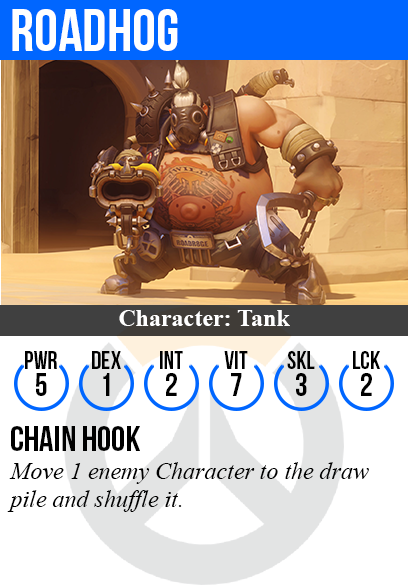
<style>
.page{position:relative;width:408px;height:585px;background:#ffffff}
.page>*{position:absolute;margin:0}
.t1{font:60px "BebasNeue";color:#ffffff}
.t2{font:24px "TimesNewRomanPS-BoldMT";color:#ffffff}
.t3{font:25px "BebasNeue";color:#000000}
.t4{font:32px "BebasNeue";color:#000000}
.t5{font:36px "BebasNeue";color:#000000}
.t6{font:24px "TimesNewRomanPS-ItalicMT";color:#000000}
</style>
<div class="page">
<p class="t1" style="left:12px;top:9px;width:166px;height:42px">roadhog</p>
<p class="t2" style="left:119px;top:310px;width:171px;height:16px">Character: Tank</p>
<p class="t3" style="left:25px;top:351px;width:32px;height:18px">PWR</p>
<p class="t3" style="left:92px;top:351px;width:29px;height:18px">dex</p>
<p class="t3" style="left:160px;top:351px;width:23px;height:18px">int</p>
<p class="t3" style="left:224px;top:351px;width:24px;height:18px">vit</p>
<p class="t3" style="left:287px;top:351px;width:28px;height:18px">skl</p>
<p class="t3" style="left:353px;top:351px;width:27px;height:18px">lck</p>
<p class="t4" style="left:36px;top:373px;width:11px;height:23px">5</p>
<p class="t4" style="left:103px;top:373px;width:7px;height:23px">1</p>
<p class="t4" style="left:166px;top:373px;width:11px;height:23px">2</p>
<p class="t4" style="left:231px;top:373px;width:11px;height:23px">7</p>
<p class="t4" style="left:296px;top:373px;width:11px;height:23px">3</p>
<p class="t4" style="left:361px;top:373px;width:11px;height:23px">2</p>
<p class="t5" style="left:11px;top:426px;width:129px;height:25px">chain hook</p>
<p class="t6" style="left:7px;top:462px;width:362px;height:50px">Move 1 enemy Character to the draw<br>pile and shuffle it.</p>
</div>
